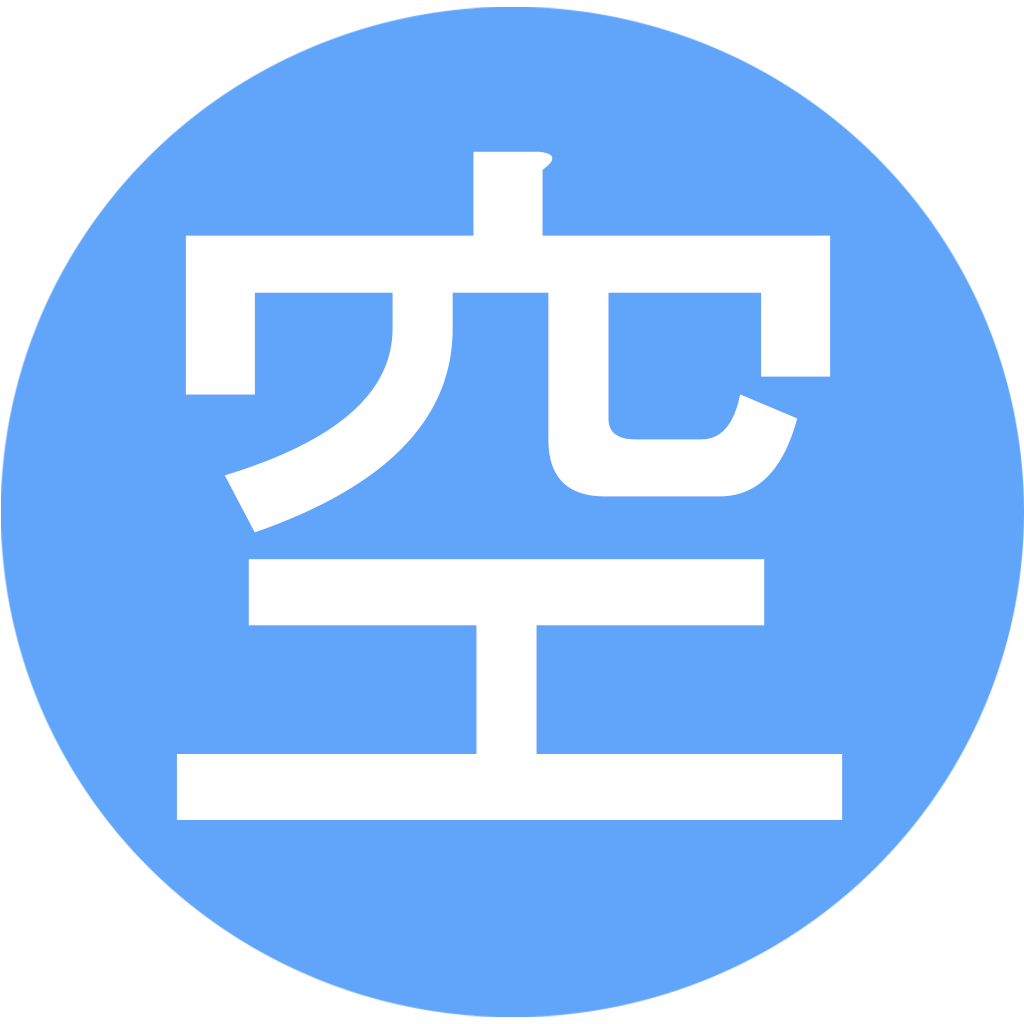
<style>
.page{position:relative;width:1024px;height:1024px;background:#60a5fa}
.page>*{position:absolute;margin:0}
.t1{font:767.3px "MS-Gothic";color:#ffffff}
</style>
<div class="page">
<p class="t1" style="left:176px;top:151px;width:667px;height:669px">空</p>
</div>
